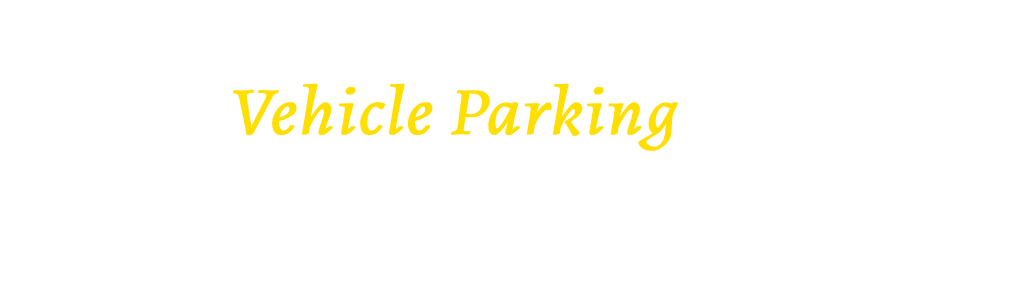
<style>
.page{position:relative;width:1024px;height:307px;background:#ffffff}
.page>*{position:absolute;margin:0}
.t1{font:68.9px "Alegreya-Italic";color:#ffdf00;font-weight:bold;scale:1.07 1}
</style>
<div class="page">
<p class="t1" style="left:232px;top:83px;width:447px;height:68px">Vehicle Parking</p>
</div>
